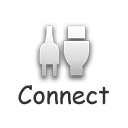
<style>
.page{position:relative;width:128px;height:128px;background:#ffffff}
.page>*{position:absolute;margin:0}
.t1{font:24.9px "ComicSansMS";color:#323232}
</style>
<div class="page">
<p class="t1" style="left:18px;top:85px;width:91px;height:20px">Connect</p>
</div>
